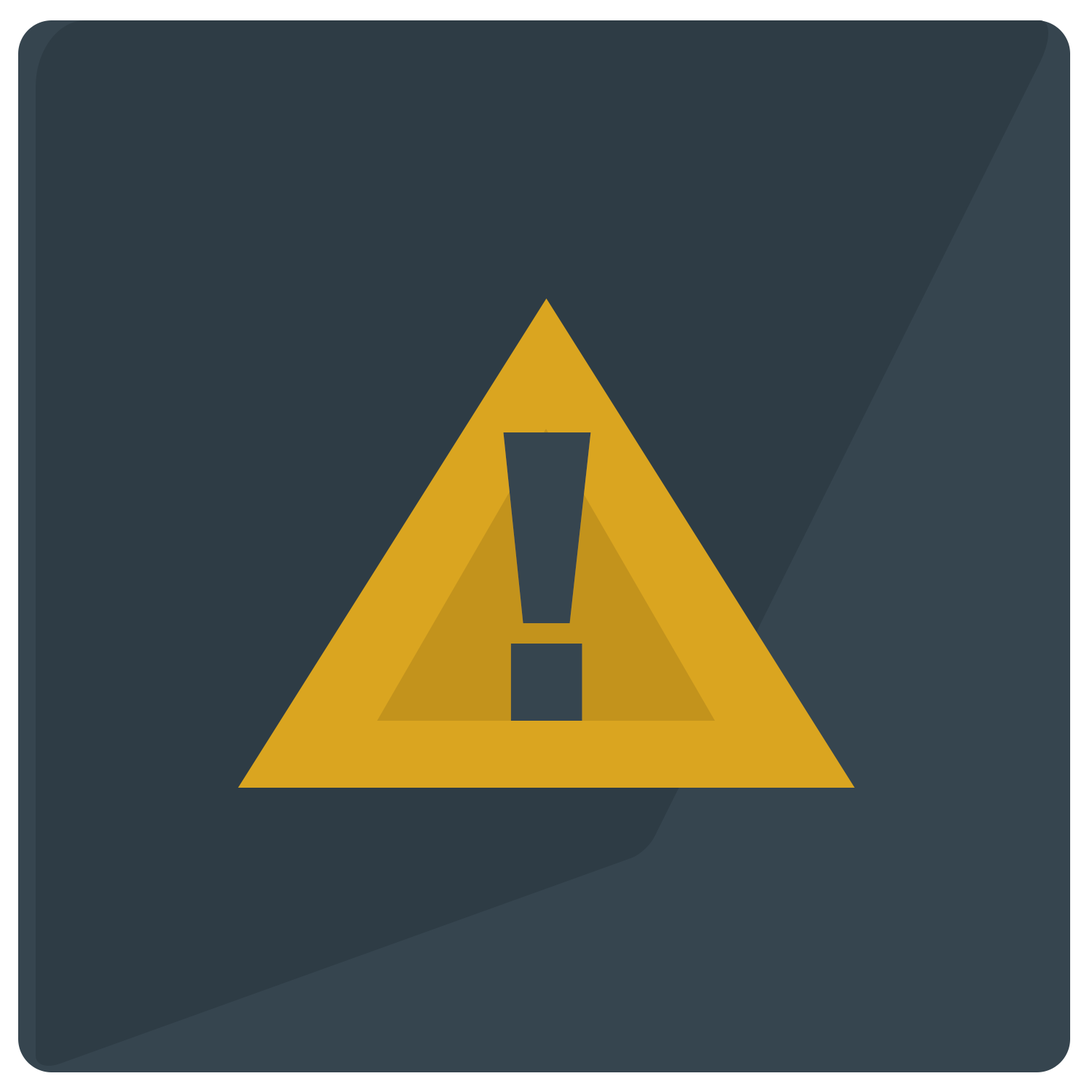
<style>
.page{position:relative;width:1092px;height:1092px;background:#2e3c45}
.page>*{position:absolute;margin:0}
.t1{font:432.3px "FranklinGothic-Heavy";color:#36454f;scale:0.87 1}
</style>
<div class="page">
<p class="t1" style="left:503px;top:432px;width:88px;height:289px">!</p>
</div>
